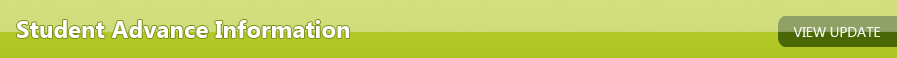
<style>
.page{position:relative;width:897px;height:58px}
.page>*{position:absolute;margin:0}
.t1{font:24px "SegoeUI-Bold";color:#fefefe}
.t2{font:14px "SegoeUI";color:#f6f7f1}
</style>
<div class="page">
<p class="t1" style="left:17px;top:20px;width:333px;height:18px">Student Advance Information</p>
<p class="t2" style="left:793px;top:27px;width:88px;height:10px">VIEW UPDATE</p>
</div>
